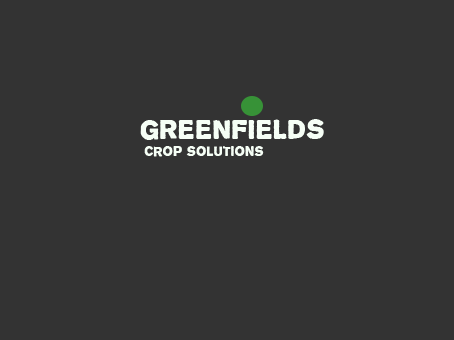
<style>
.page{position:relative;width:454px;height:340px;background:#333333}
.page>*{position:absolute;margin:0}
.t1{font:24px "Propaganda";color:#f6fff6}
.t2{font:12px "Propaganda";color:#f6fff6}
</style>
<div class="page">
<p class="t1" style="left:140px;top:119px;width:184px;height:21px">GREENFIELDS</p>
<p class="t2" style="left:144px;top:146px;width:120px;height:11px">Crop solutions</p>
</div>
